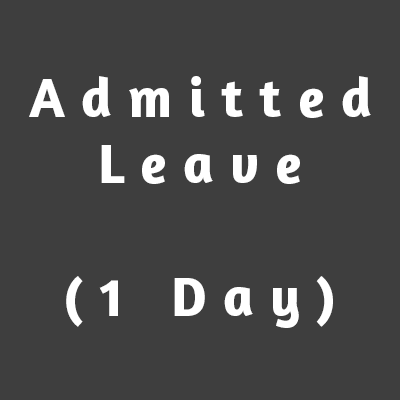
<style>
.page{position:relative;width:400px;height:400px;background:#3e3e3e}
.page>*{position:absolute;margin:0}
.t1{font:55.4px "Amaranth-Bold";letter-spacing:0.3em;color:#ffffff}
</style>
<div class="page">
<p class="t1" style="left:29px;top:76px;width:342px;height:252px;text-align:center">Admitted<br>Leave<br><br>(1 Day)</p>
</div>
